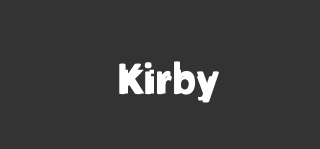
<style>
.page{position:relative;width:320px;height:149px;background:#333333}
.page>*{position:absolute;margin:0}
.t1{font:32.9px "Arial-BoldMT";letter-spacing:0.075em;color:#fffefe}
</style>
<div class="page">
<p class="t1" style="left:123px;top:69px;width:91px;height:32px">Kirby</p>
</div>
